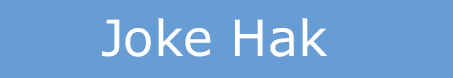
<style>
.page{position:relative;width:453px;height:78px;background:#679dd4}
.page>*{position:absolute;margin:0}
.t1{font:49.7px "Verdana";color:#ffffff}
</style>
<div class="page">
<p class="t1" style="left:102px;top:18px;width:226px;height:39px">Joke Hak</p>
</div>
